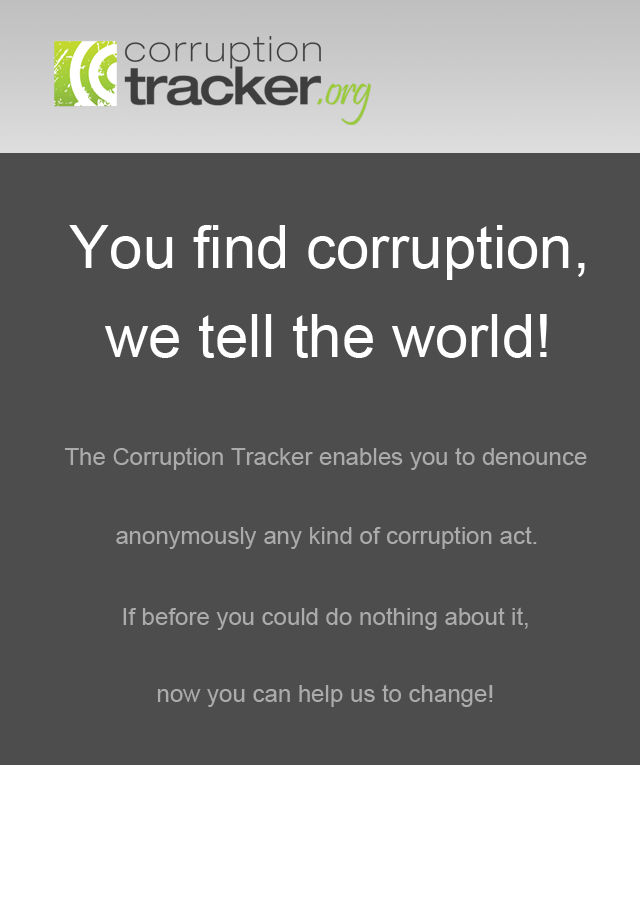
<style>
.page{position:relative;width:640px;height:920px;background:#4d4d4d}
.page>*{position:absolute;margin:0}
.t1{font:60px "ArialMT";color:#ffffff}
.t2{font:24px "ArialMT";color:#acabab}
</style>
<div class="page">
<p class="t1" style="left:69px;top:225px;width:516px;height:55px">You find corruption,</p>
<p class="t1" style="left:105px;top:314px;width:442px;height:44px">we tell the world!</p>
<p class="t2" style="left:64px;top:447px;width:523px;height:23px">The Corruption Tracker enables you to denounce</p>
<p class="t2" style="left:116px;top:526px;width:421px;height:23px">anonymously any kind of corruption act.</p>
<p class="t2" style="left:123px;top:607px;width:405px;height:23px">If before you could do nothing about it,</p>
<p class="t2" style="left:157px;top:684px;width:336px;height:23px">now you can help us to change!</p>
</div>
